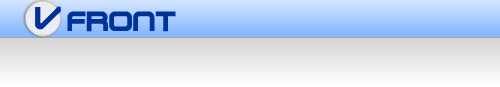
<style>
.page{position:relative;width:500px;height:87px}
.page>*{position:absolute;margin:0}
.t1{font:30px "TerminatorTwo";color:#003399}
</style>
<div class="page">
<p class="t1" style="left:67px;top:11px;width:109px;height:21px">front</p>
</div>
